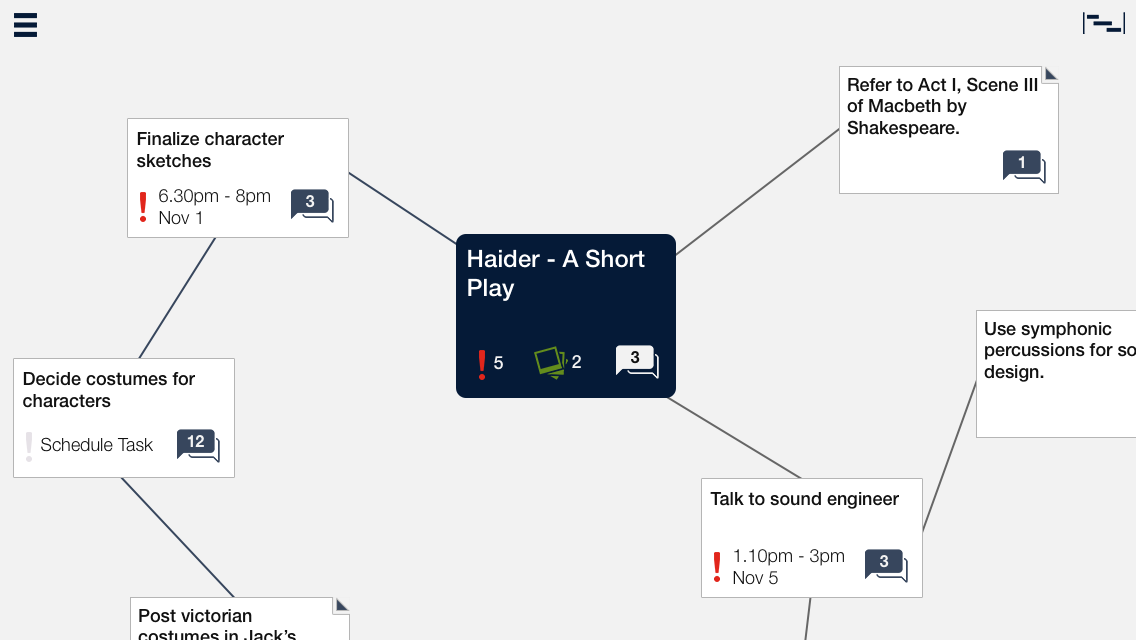
<style>
.page{position:relative;width:1136px;height:640px;background:#f2f2f2}
.page>*{position:absolute;margin:0}
.t1{font:18px "HelveticaNeue-Medium";color:#111111}
.t2{font:16px "HelveticaNeue-Bold";color:#f2f2f2}
.t3{font:18px "HelveticaNeue-Light";color:#111111}
.t4{font:24px "HelveticaNeue-Medium";color:#ffffff}
.t5{font:16px "HelveticaNeue-Bold";color:#111111}
.t6{font:18px "HelveticaNeue-Medium";color:#f2f2f2}
</style>
<div class="page">
<p class="t1" style="left:847px;top:77px;width:191px;height:61px">Refer to Act I, Scene III of Macbeth by Shakespeare.</p>
<p class="t1" style="left:137px;top:132px;width:147px;height:36px">Finalize character sketches</p>
<p class="t2" style="left:1018px;top:156px;width:6px;height:12px">1</p>
<p class="t3" style="left:159px;top:189px;width:111px;height:36px">6.30pm - 8pm Nov 1</p>
<p class="t2" style="left:306px;top:195px;width:9px;height:13px">3</p>
<p class="t4" style="left:468px;top:249px;width:177px;height:52px">Haider - A Short Play</p>
<p class="t5" style="left:631px;top:351px;width:9px;height:13px">3</p>
<p class="t6" style="left:494px;top:356px;width:9px;height:14px">5</p>
<p class="t6" style="left:572px;top:355px;width:9px;height:13px">2</p>
<p class="t1" style="left:23px;top:372px;width:172px;height:36px">Decide costumes for characters</p>
<p class="t3" style="left:41px;top:437px;width:112px;height:15px">Schedule Task</p>
<p class="t2" style="left:187px;top:435px;width:17px;height:12px">12</p>
<p class="t1" style="left:710px;top:492px;width:189px;height:17px">Talk to sound engineer</p>
<p class="t3" style="left:733px;top:549px;width:111px;height:36px">1.10pm - 3pm Nov 5</p>
<p class="t2" style="left:880px;top:555px;width:9px;height:13px">3</p>
</div>
